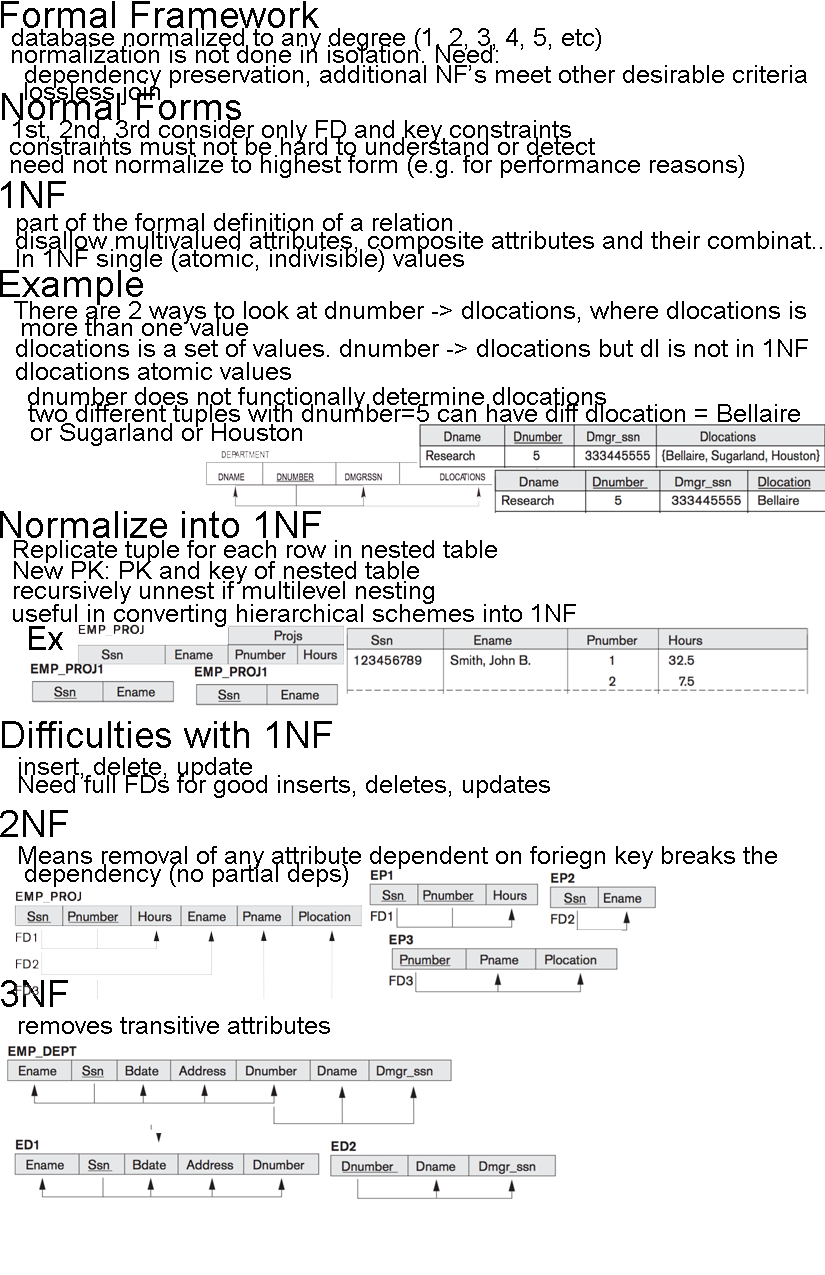
<style>
.page{position:relative;width:825px;height:1275px;background:#ffffff}
.page>*{position:absolute;margin:0}
.t1{font:37.5px "ArialMT";color:#000000}
.t2{font:25px "ArialMT";color:#000000}
.t3{font:33.3px "ArialMT";color:#000000}
</style>
<div class="page">
<p class="t1" style="left:1px;top:1px;width:318px;height:27px">Formal Framework</p>
<p class="t2" style="left:12px;top:28px;width:589px;height:23px">database normalized to any degree (1, 2, 3, 4, 5, etc)</p>
<p class="t2" style="left:12px;top:45px;width:486px;height:18px">normalization is not done in isolation. Need:</p>
<p class="t2" style="left:25px;top:65px;width:782px;height:23px">dependency preservation, additional NF’s meet other desirable criteria</p>
<p class="t2" style="left:25px;top:82px;width:135px;height:23px">lossless join</p>
<p class="t1" style="left:2px;top:93px;width:239px;height:27px">Normal Forms</p>
<p class="t2" style="left:13px;top:120px;width:558px;height:23px">1st, 2nd, 3rd consider only FD and key constraints</p>
<p class="t2" style="left:10px;top:137px;width:585px;height:18px">constraints must not be hard to understand or detect</p>
<p class="t2" style="left:11px;top:155px;width:733px;height:23px">need not normalize to highest form (e.g. for performance reasons)</p>
<p class="t1" style="left:1px;top:181px;width:65px;height:27px">1NF</p>
<p class="t2" style="left:17px;top:213px;width:435px;height:23px">part of the formal definition of a relation</p>
<p class="t2" style="left:16px;top:231px;width:806px;height:23px">disallow multivalued attributes, composite attributes and their combinat..</p>
<p class="t2" style="left:17px;top:249px;width:447px;height:23px">In 1NF single (atomic, indivisible) values</p>
<p class="t1" style="left:0px;top:270px;width:143px;height:35px">Example</p>
<p class="t2" style="left:14px;top:301px;width:792px;height:23px">There are 2 ways to look at dnumber -&gt; dlocations, where dlocations is</p>
<p class="t2" style="left:22px;top:318px;width:226px;height:18px">more than one value</p>
<p class="t2" style="left:16px;top:339px;width:792px;height:18px">dlocations is a set of values. dnumber -&gt; dlocations but dl is not in 1NF</p>
<p class="t2" style="left:16px;top:362px;width:275px;height:18px">dlocations atomic values</p>
<p class="t2" style="left:28px;top:387px;width:578px;height:23px">dnumber does not functionally determine dlocations</p>
<p class="t2" style="left:28px;top:404px;width:772px;height:23px">two different tuples with dnumber=5 can have diff dlocation = Bellaire</p>
<p class="t2" style="left:31px;top:423px;width:271px;height:23px">or Sugarland or Houston</p>
<p class="t1" style="left:0px;top:511px;width:321px;height:27px">Normalize into 1NF</p>
<p class="t2" style="left:14px;top:540px;width:483px;height:23px">Replicate tuple for each row in nested table</p>
<p class="t2" style="left:14px;top:561px;width:405px;height:23px">New PK: PK and key of nested table</p>
<p class="t2" style="left:14px;top:581px;width:420px;height:23px">recursively unnest if multilevel nesting</p>
<p class="t2" style="left:13px;top:604px;width:563px;height:23px">useful in converting hierarchical schemes into 1NF</p>
<p class="t3" style="left:29px;top:626px;width:34px;height:24px">Ex</p>
<p class="t1" style="left:2px;top:721px;width:330px;height:27px">Difficulties with 1NF</p>
<p class="t2" style="left:19px;top:757px;width:233px;height:23px">insert, delete, update</p>
<p class="t2" style="left:19px;top:775px;width:531px;height:23px">Need full FDs for good inserts, deletes, updates</p>
<p class="t1" style="left:0px;top:810px;width:68px;height:27px">2NF</p>
<p class="t2" style="left:19px;top:846px;width:758px;height:23px">Means removal of any attribute dependent on foriegn key breaks the</p>
<p class="t2" style="left:25px;top:864px;width:323px;height:23px">dependency (no partial deps)</p>
<p class="t1" style="left:1px;top:980px;width:67px;height:27px">3NF</p>
<p class="t2" style="left:19px;top:1016px;width:311px;height:18px">removes transitive attributes</p>
</div>
